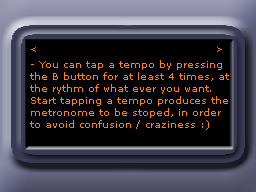
<style>
.page{position:relative;width:256px;height:192px;background:#000000}
.page>*{position:absolute;margin:0}
.t1{font:9px "MSReferenceSansSerif";color:#ff8400}
.t2{font:10px "MSReferenceSansSerif";color:#ff8400}
</style>
<div class="page">
<p class="t1" style="left:31px;top:47px;width:5px;height:5px">&lt;</p>
<p class="t1" style="left:217px;top:47px;width:5px;height:5px">&gt;</p>
<p class="t2" style="left:30px;top:60px;width:199px;height:70px">- You can tap a tempo by pressing <br>the B button for at least 4 times, at<br>the rythm of what ever you want.<br>Start tapping a tempo produces the<br>metronome to be stoped, in order<br>to avoid confusion / craziness :)</p>
</div>
